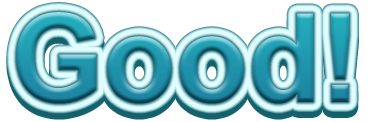
<style>
.page{position:relative;width:370px;height:122px;background:#ffffff}
.page>*{position:absolute;margin:0}
.t1{font:123.2px "Arial-BoldMT";scale:0.96 1}
</style>
<div class="page">
<p class="t1" style="left:16px;top:12px;width:333px;height:92px">Good!</p>
<p class="t1" style="left:16px;top:18px;width:333px;height:92px">Good!</p>
</div>
